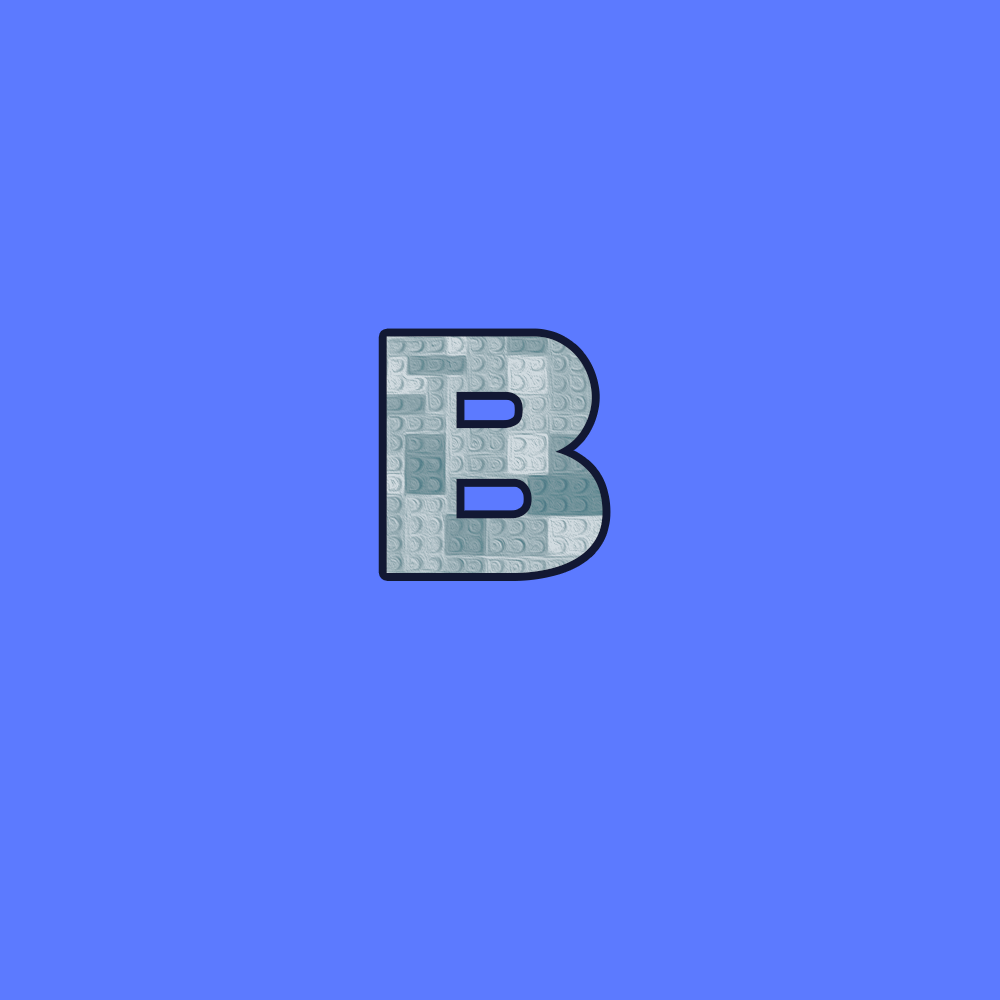
<style>
.page{position:relative;width:1000px;height:1000px;background:#5c7aff}
.page>*{position:absolute;margin:0}
.t1{font:333.3px "Raleway-Black";letter-spacing:0.04em;text-transform:uppercase;scale:1.07 1}
</style>
<div class="page">
<p class="t1" style="left:386px;top:336px;width:217px;height:237px">B</p>
</div>
